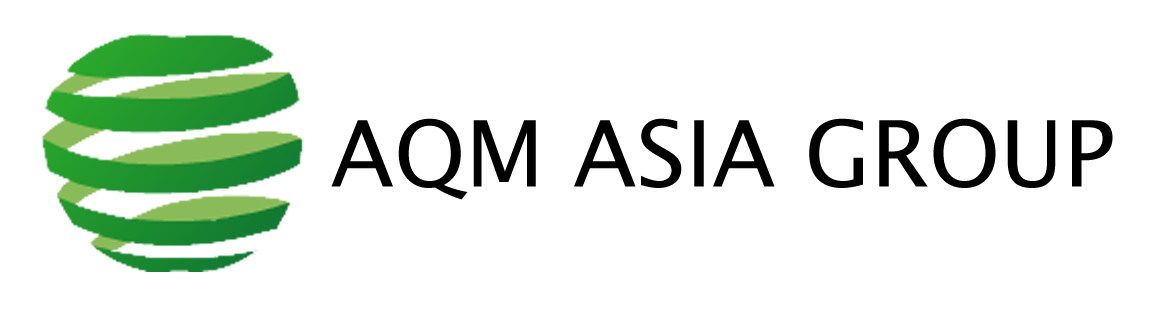
<style>
.page{position:relative;width:1164px;height:316px;background:#ffffff}
.page>*{position:absolute;margin:0}
.t1{font:91.7px "LucidaSansUnicode";color:#000000}
</style>
<div class="page">
<p class="t1" style="left:331px;top:118px;width:782px;height:82px">AQM ASIA GROUP</p>
</div>
